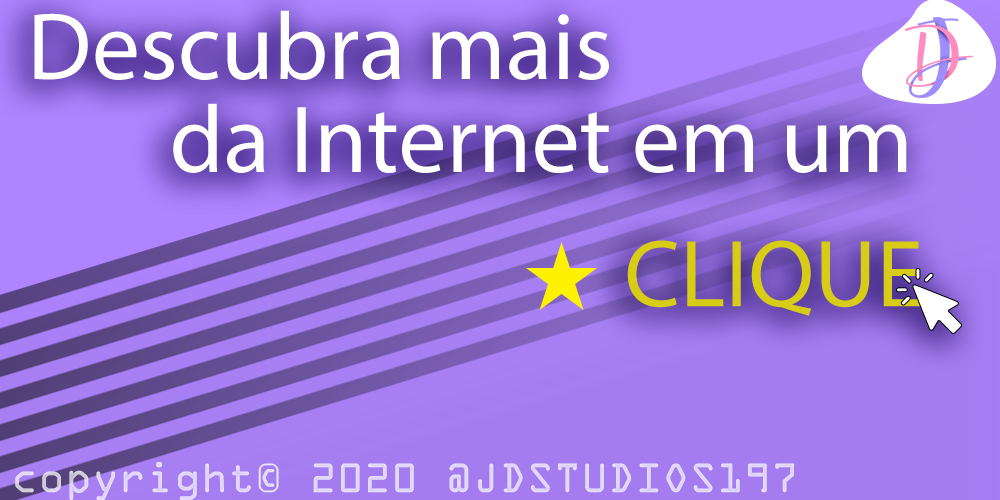
<style>
.page{position:relative;width:1000px;height:500px}
.page>*{position:absolute;margin:0}
.t1{font:96px "MyriadPro-Regular";color:#ffffff}
.t2{font:96px "MyriadPro-Regular";color:#d8cd16}
.t3{font:44.2px "OCRAExtended";color:#e2d8fa}
</style>
<div class="page">
<p class="t1" style="left:34px;top:10px;width:575px;height:70px">Descubra mais</p>
<p class="t1" style="left:173px;top:103px;width:734px;height:70px">da Internet em um</p>
<p class="t2" style="left:627px;top:240px;width:293px;height:76px">CLIQUE</p>
<p class="t3" style="left:15px;top:462px;width:779px;height:38px">copyright© 2020 @JDSTUDIOS197</p>
</div>
